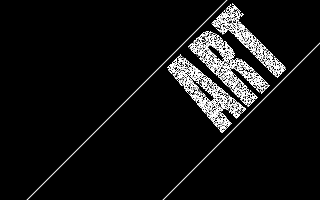
<style>
.page{position:relative;width:320px;height:200px;background:#000000}
.page>*{position:absolute;margin:0}
.t1{font:108px "Impact";scale:0.61 1}
</style>
<div class="page">
<p class="t1" style="left:167px;top:3px;width:120px;height:130px;rotate:-45deg">ART</p>
</div>
